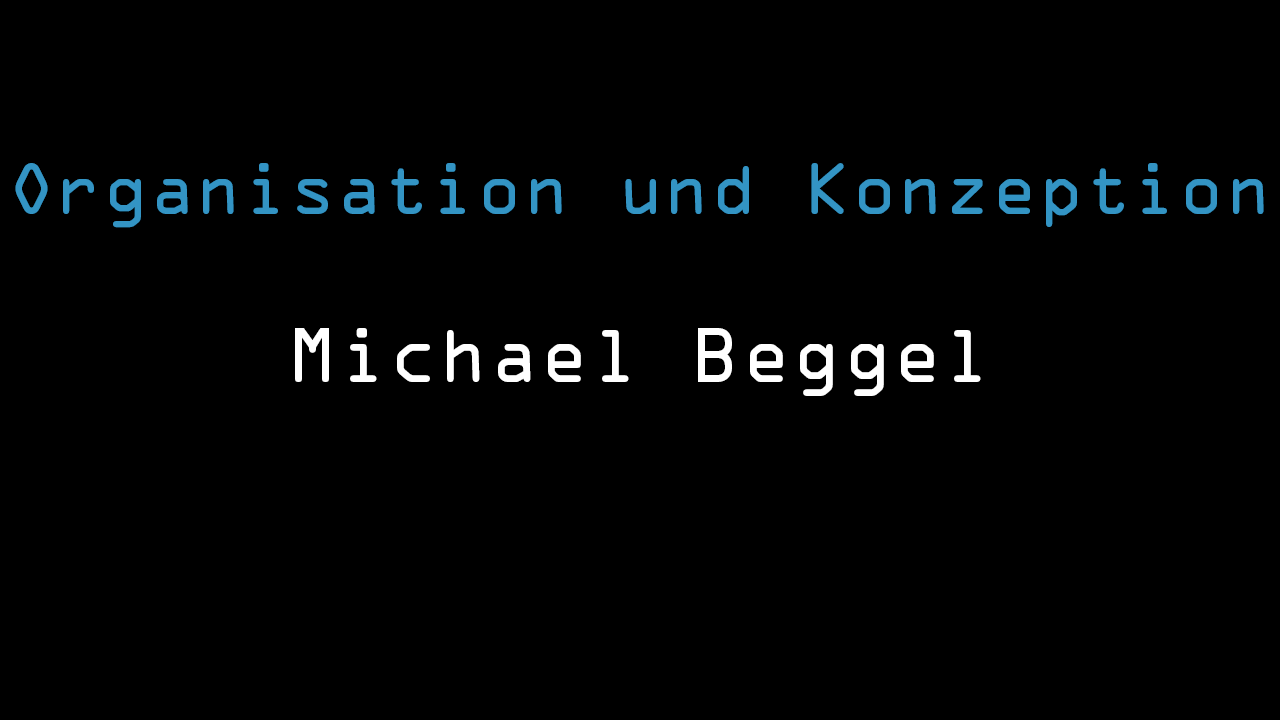
<style>
.page{position:relative;width:1280px;height:720px;background:#000000}
.page>*{position:absolute;margin:0}
.t1{font:65px "OCRAStd";color:#3394c4}
.t2{font:70px "OCRAStd";color:#3394c4}
.t3{font:70px "OCRAStd";color:#ffffff}
</style>
<div class="page">
<p class="t1" style="left:15px;top:163px;width:1249px;height:233px"><span class="t2"><br><br></span>Organisation und Konzeption<br><span class="t3"><br>Michael Beggel</span></p>
</div>
